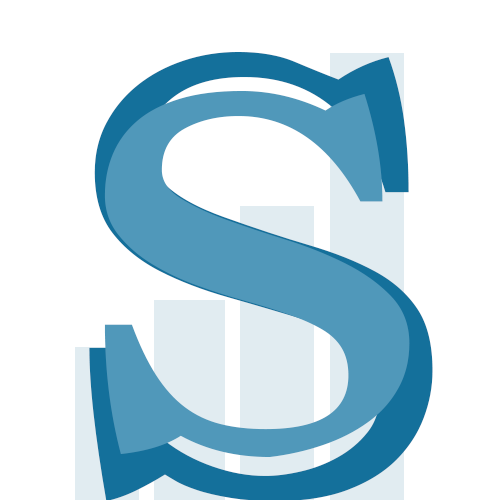
<style>
.page{position:relative;width:500px;height:500px;background:#ffffff}
.page>*{position:absolute;margin:0}
.t1{font:646.8px "Marion-Regular";scale:1.19 1}
.t2{font:829.2px "Marion-Regular";color:#5098ba;scale:1.2 1}
</style>
<div class="page">
<p class="t1" style="left:89px;top:52px;width:344px;height:449px">S</p>
<p class="t2" style="left:104px;top:91px;width:306px;height:366px">s</p>
</div>
